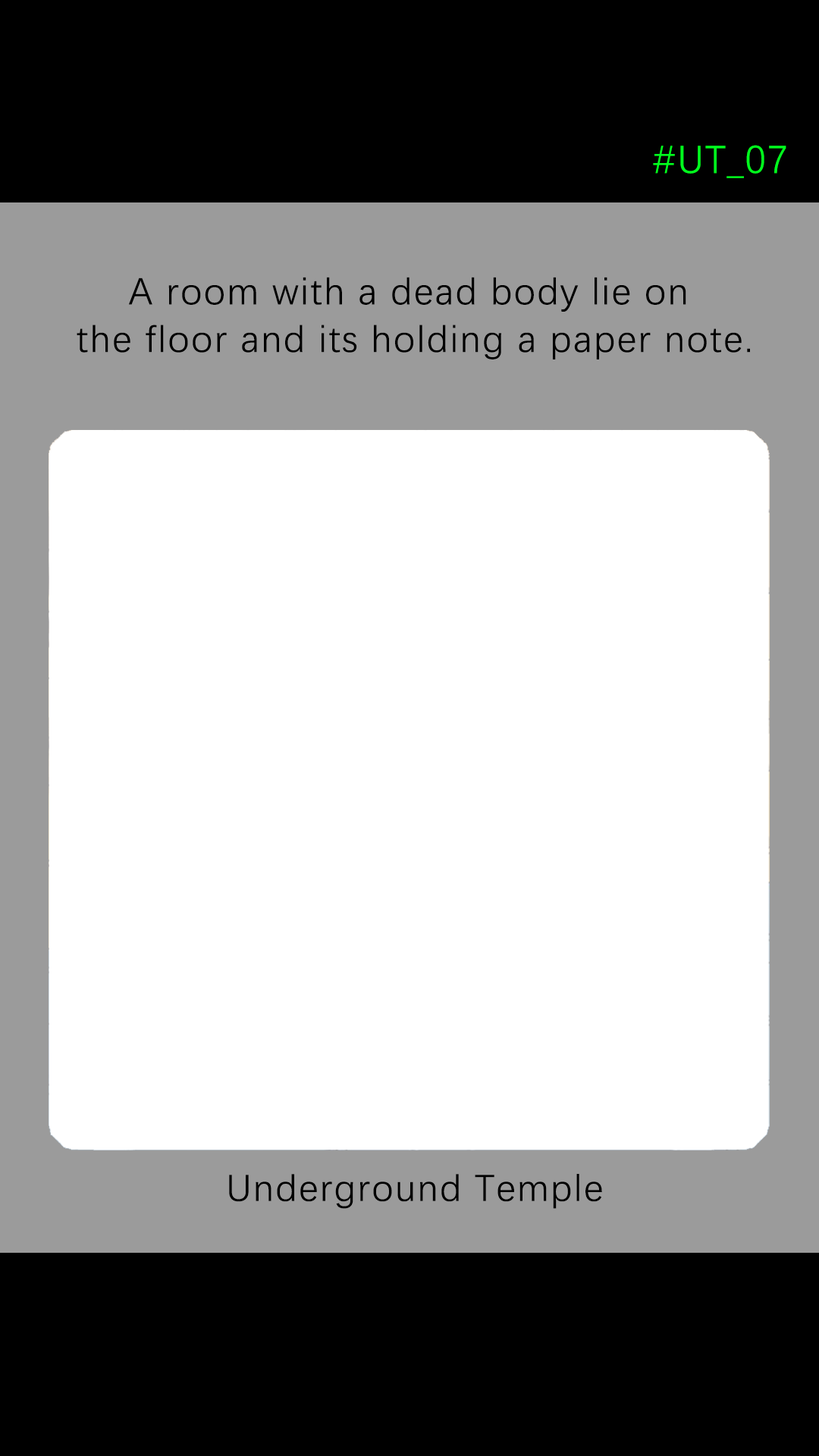
<style>
.page{position:relative;width:819px;height:1456px;background:#ffffff}
.page>*{position:absolute;margin:0}
.t1{font:39.2px "DengXian-Regular";letter-spacing:0.04em;color:#00ff1e}
.t2{font:37.9px/47.6px "DengXian-Regular";letter-spacing:0.04em;color:#000000}
.t3{font:37.9px "DengXian-Regular";letter-spacing:0.04em;color:#000000}
</style>
<div class="page">
<p class="t1" style="left:653px;top:145px;width:133px;height:33px">#UT_07</p>
<p class="t2" style="left:77px;top:277px;width:673px;height:82px;text-align:center">A room with a dead body lie on <br>the floor and its holding a paper note.</p>
<p class="t3" style="left:229px;top:1174px;width:373px;height:35px">Underground Temple</p>
</div>
